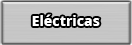
<style>
.page{position:relative;width:132px;height:45px}
.page>*{position:absolute;margin:0}
.t1{font:14px "NotoSans-ExtraBold";color:#ffffff}
</style>
<div class="page">
<p class="t1" style="left:32px;top:14px;width:68px;height:12px">Eléctricas</p>
</div>
